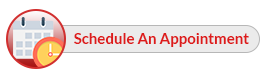
<style>
.page{position:relative;width:267px;height:75px;background:#ffffff}
.page>*{position:absolute;margin:0}
.t1{font:15px "Lato-Bold";color:#dd1b1b}
</style>
<div class="page">
<p class="t1" style="left:74px;top:33px;width:175px;height:14px">Schedule An Appointment</p>
</div>
